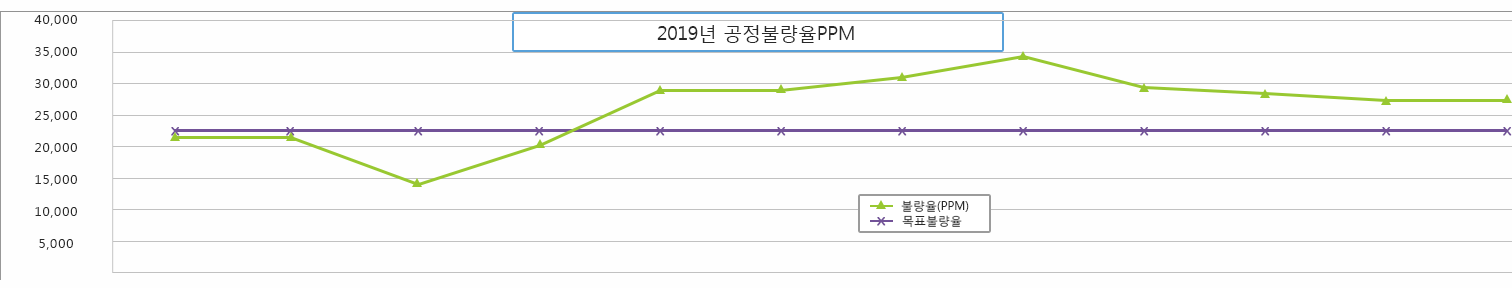
<style>
.page{position:relative;width:1512px;height:288px;background:#fefefe}
.page>*{position:absolute;margin:0}
.t1{font:13.3px/32px "MalgunGothicRegular";letter-spacing:0.05em;color:#282828}
.t2{font:18.7px "MalgunGothicRegular";color:#282828}
.t3{font:14.7px "Gulim";letter-spacing:-0.05em;color:#725298;font-weight:bold;scale:1.2 1}
.t4{font:12px "MalgunGothicRegular";color:#282828}
</style>
<div class="page">
<p class="t1" style="left:34px;top:15px;width:43px;height:235px;text-align:center">40,000<br>35,000<br>30,000<br>25,000<br>20,000<br>15,000<br>10,000<br>5,000</p>
<p class="t2" style="left:657px;top:25px;width:197px;height:18px">2019년 공정불량율PPM</p>
<p class="t3" style="left:171px;top:127px;width:9px;height:9px">x</p>
<p class="t3" style="left:286px;top:127px;width:9px;height:9px">x</p>
<p class="t3" style="left:414px;top:127px;width:9px;height:9px">x</p>
<p class="t3" style="left:535px;top:127px;width:9px;height:9px">x</p>
<p class="t3" style="left:656px;top:127px;width:9px;height:9px">x</p>
<p class="t3" style="left:777px;top:127px;width:9px;height:9px">x</p>
<p class="t3" style="left:898px;top:127px;width:9px;height:9px">x</p>
<p class="t3" style="left:1019px;top:127px;width:9px;height:9px">x</p>
<p class="t3" style="left:1140px;top:127px;width:9px;height:9px">x</p>
<p class="t3" style="left:1261px;top:127px;width:9px;height:9px">x</p>
<p class="t3" style="left:1382px;top:127px;width:9px;height:9px">x</p>
<p class="t3" style="left:1503px;top:127px;width:9px;height:9px">x</p>
<p class="t4" style="left:901px;top:200px;width:68px;height:12px">불량율(PPM)</p>
<p class="t3" style="left:877px;top:217px;width:9px;height:9px">x</p>
<p class="t4" style="left:902px;top:215px;width:60px;height:13px">목표불량율</p>
</div>
